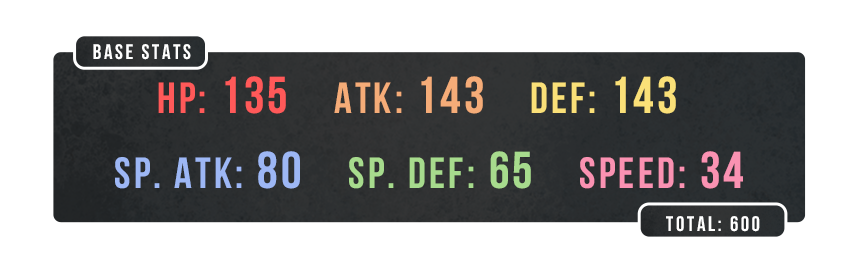
<style>
.page{position:relative;width:858px;height:274px;background:#ffffff}
.page>*{position:absolute;margin:0}
.t1{font:21px "UTM-Bebas";letter-spacing:0.12em;color:#ffffff}
.t2{font:43.7px/75px "UTM-Bebas";letter-spacing:0.06em;color:#9db7f5}
.t3{font:43.7px/75px "UTM-Bebas";letter-spacing:0.06em;color:#ff5959}
.t4{font:51.8px/75px "UTM-Bebas";letter-spacing:0.06em;color:#ff5959}
.t5{font:43.7px/75px "UTM-Bebas";letter-spacing:0.06em;color:#f5ac78}
.t6{font:51.8px/75px "UTM-Bebas";letter-spacing:0.06em;color:#f5ac78}
.t7{font:43.7px/75px "UTM-Bebas";letter-spacing:0.06em;color:#fae078}
.t8{font:51.8px/75px "UTM-Bebas";letter-spacing:0.06em;color:#fae078}
.t9{font:51.8px/75px "UTM-Bebas";letter-spacing:0.06em;color:#9db7f5}
.t10{font:43.7px/75px "UTM-Bebas";letter-spacing:0.06em;color:#a7db8d}
.t11{font:51.8px/75px "UTM-Bebas";letter-spacing:0.06em;color:#a7db8d}
.t12{font:43.7px/75px "UTM-Bebas";letter-spacing:0.06em;color:#fa92b2}
.t13{font:51.8px/75px "UTM-Bebas";letter-spacing:0.06em;color:#fa92b2}
</style>
<div class="page">
<p class="t1" style="left:93px;top:44px;width:98px;height:16px">BASE STATs</p>
<p class="t2" style="left:115px;top:76px;width:628px;height:113px;text-align:center"><span class="t3">HP: </span><span class="t4">135    </span><span class="t5">Atk: </span><span class="t6">143    </span><span class="t7">Def: </span><span class="t8">143   <br></span>Sp. Atk: <span class="t9">80    </span><span class="t10">Sp. Def: </span><span class="t11">65    </span><span class="t12">Speed: </span><span class="t13">34</span></p>
<p class="t1" style="left:666px;top:216px;width:94px;height:16px">TOTAL: 600</p>
</div>
